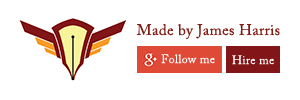
<style>
.page{position:relative;width:300px;height:100px;background:#ffffff}
.page>*{position:absolute;margin:0}
.t1{font:15.1px "ACaslonPro-Regular";letter-spacing:0.025em;color:#811e16}
.t2{font:12px "ACaslonPro-Regular";letter-spacing:0.025em;color:#ffffff}
</style>
<div class="page">
<p class="t1" style="left:136px;top:24px;width:144px;height:16px">Made by James Harris</p>
<p class="t2" style="left:161px;top:54px;width:54px;height:10px">Follow me</p>
<p class="t2" style="left:232px;top:55px;width:42px;height:10px">Hire me</p>
</div>
